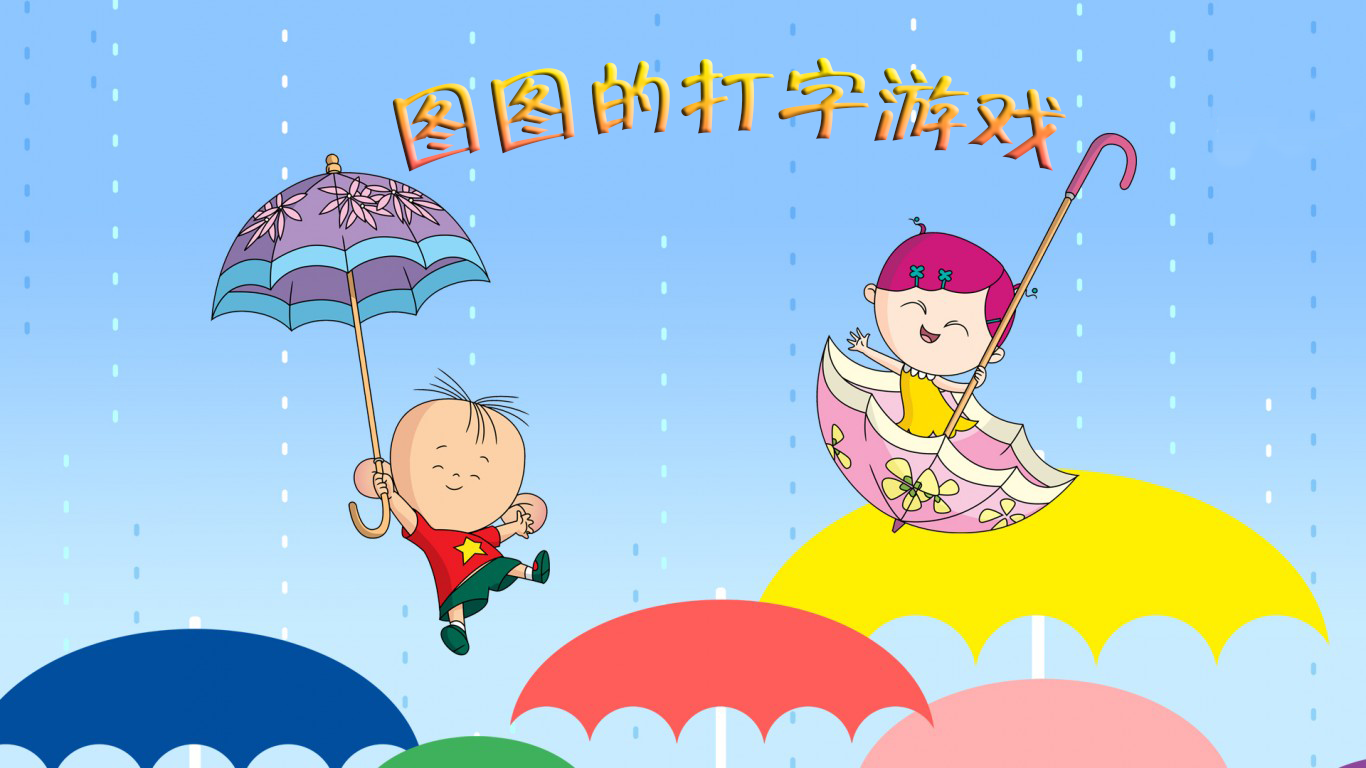
<style>
.page{position:relative;width:1366px;height:768px;background:#8ec6ff}
.page>*{position:absolute;margin:0}
.t1{font:88px "FZZBHJW--GB1-0";letter-spacing:-0.02em}
</style>
<div class="page">
<p class="t1" style="left:392px;top:57px;width:674px;height:115px">图图的打字游戏</p>
</div>
